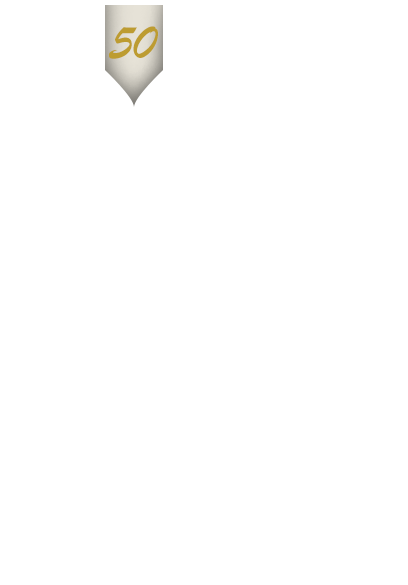
<style>
.page{position:relative;width:408px;height:585px;background:#ffffff}
.page>*{position:absolute;margin:0}
.t1{font:52px "BrushScriptMT";color:#bd9c31}
</style>
<div class="page">
<p class="t1" style="left:109px;top:26px;width:49px;height:33px">50</p>
</div>
